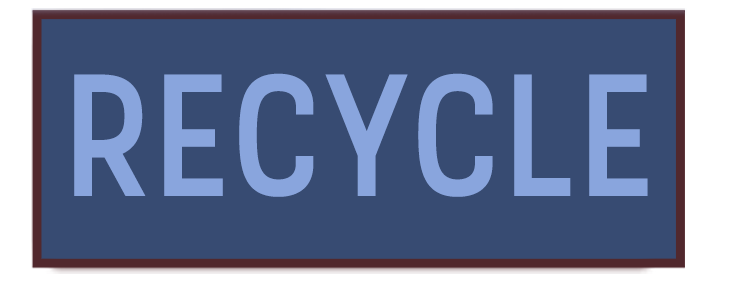
<style>
.page{position:relative;width:731px;height:297px;background:#374b72}
.page>*{position:absolute;margin:0}
.t1{font:173.1px "Stellar-Medium";color:#89a5dd}
</style>
<div class="page">
<p class="t1" style="left:74px;top:73px;width:574px;height:124px">RECYCLE</p>
</div>
